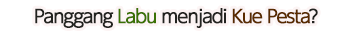
<style>
.page{position:relative;width:352px;height:33px;background:#ffffff}
.page>*{position:absolute;margin:0}
.t1{font:18px "UDShinGoPro-Regular";letter-spacing:-0.08em;color:#592b00;font-weight:bold}
.t2{font:18px "UDShinGoPro-Regular";letter-spacing:-0.08em;color:#232320;font-weight:bold}
.t3{font:18px "UDShinGoPro-Regular";letter-spacing:-0.08em;color:#3a7103;font-weight:bold}
</style>
<div class="page">
<p class="t1" style="left:35px;top:8px;width:283px;height:20px"><span class="t2">Panggang </span><span class="t3">Labu</span><span class="t2"> menjadi </span>Kue Pesta<span class="t2">?</span></p>
</div>
